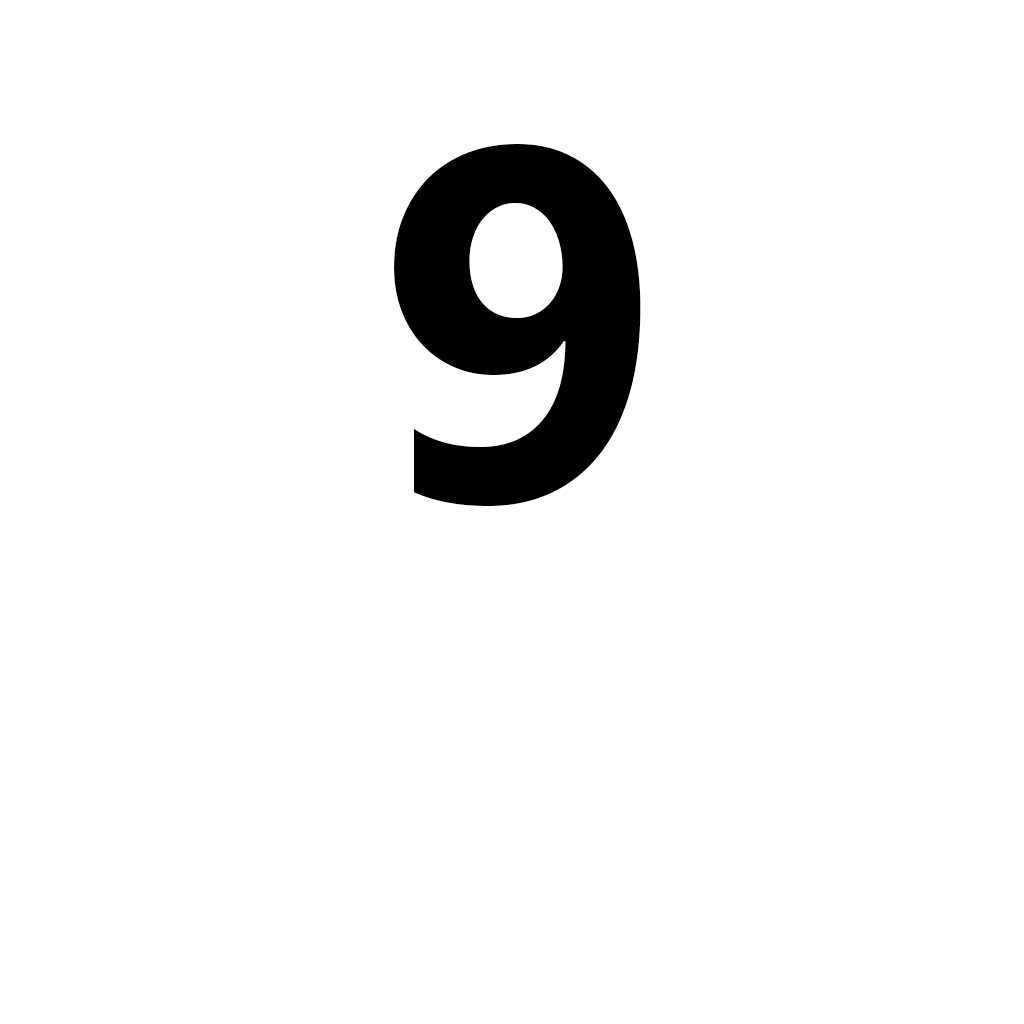
<style>
.page{position:relative;width:1024px;height:1024px;background:#ffffff}
.page>*{position:absolute;margin:0}
.t1{font:500px "Ebrima-Bold";color:#000000}
</style>
<div class="page">
<p class="t1" style="left:394px;top:143px;width:247px;height:363px">9</p>
</div>
